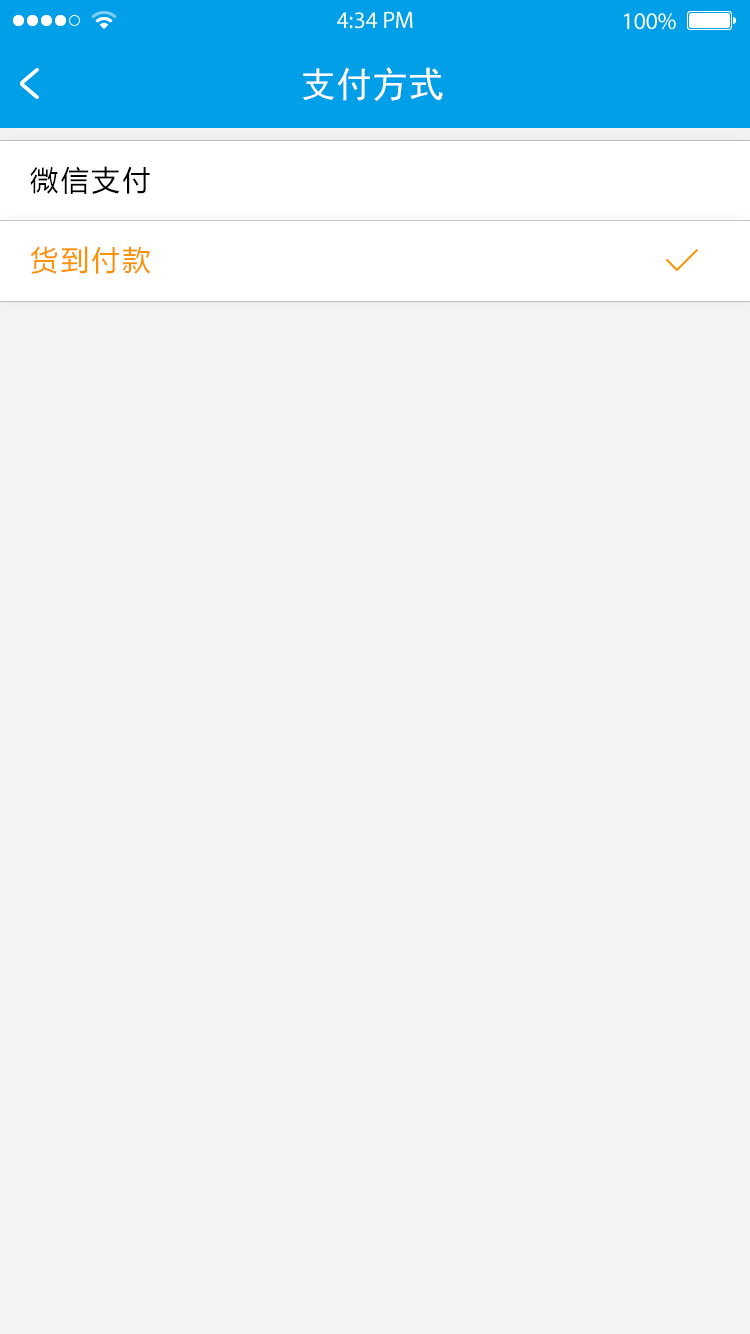
<style>
.page{position:relative;width:750px;height:1334px;background:#f3f4f6}
.page>*{position:absolute;margin:0}
.t1{font:36px "SimHei";color:#ffffff}
.t2{font:28px "MicrosoftYaHei";letter-spacing:0.1em;color:#000000}
.t3{font:28px "MicrosoftYaHei";letter-spacing:0.1em;color:#ff9000}
</style>
<div class="page">
<p class="t1" style="left:302px;top:67px;width:141px;height:34px">支付方式</p>
<p class="t2" style="left:30px;top:166px;width:120px;height:28px">微信支付</p>
<p class="t3" style="left:30px;top:246px;width:121px;height:28px">货到付款</p>
</div>
